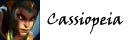
<style>
.page{position:relative;width:140px;height:40px;background:#ffffff}
.page>*{position:absolute;margin:0}
.t1{font:12px "VinerHandITC";color:#000000}
</style>
<div class="page">
<p class="t1" style="left:47px;top:12px;width:76px;height:22px">Cassiopeia</p>
</div>
